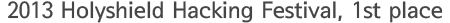
<style>
.page{position:relative;width:450px;height:23px;background:#ffffff}
.page>*{position:absolute;margin:0}
.t1{font:23px "SeoulNamsanB";color:#454545}
</style>
<div class="page">
<p class="t1" style="left:8px;top:1px;width:435px;height:22px">2013 Holyshield Hacking Festival, 1st place</p>
</div>
